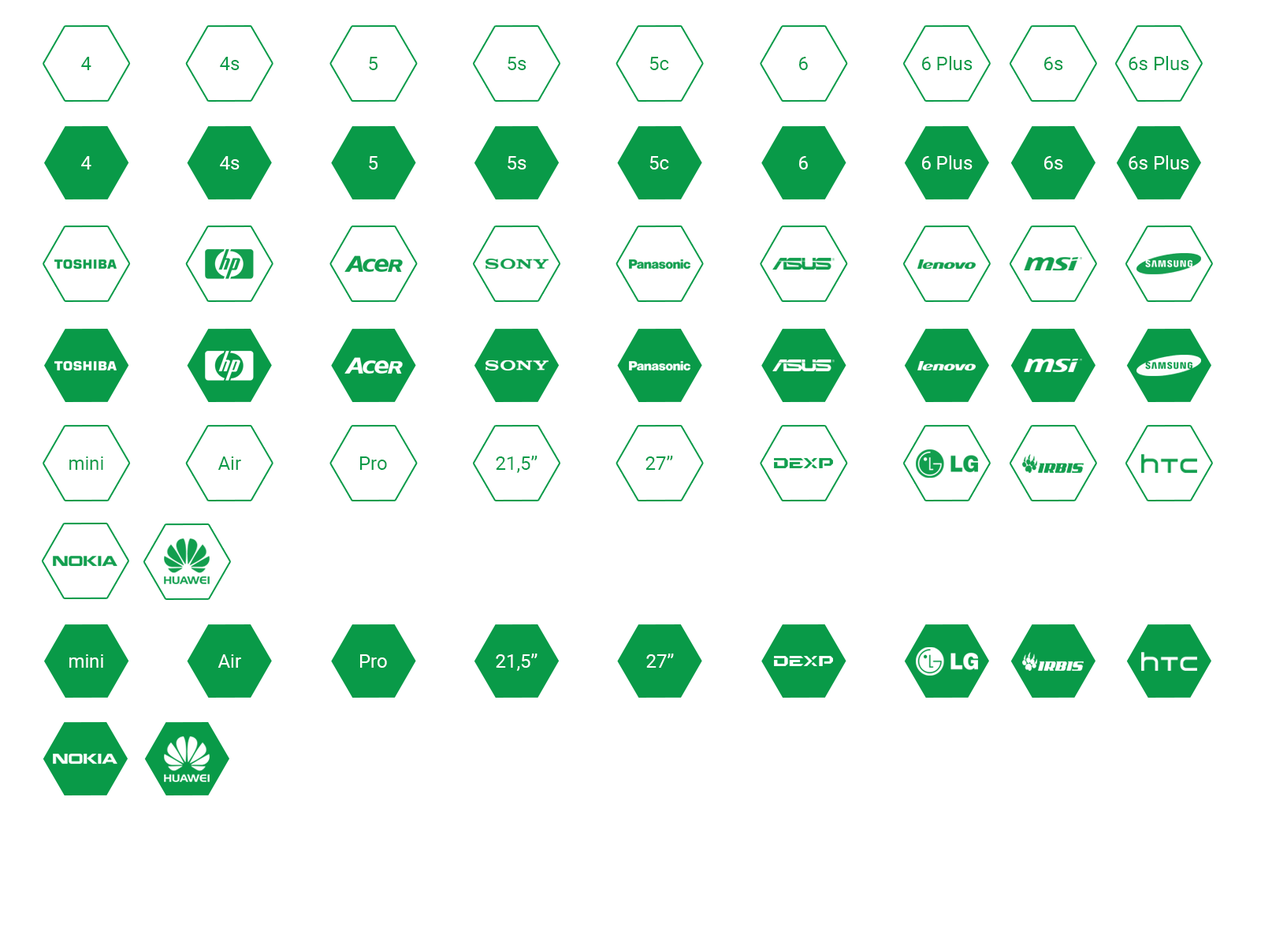
<style>
.page{position:relative;width:1261px;height:946px;background:#ffffff}
.page>*{position:absolute;margin:0}
.t1{font:18.9px "Roboto-Regular";color:#099a48}
.t2{font:18.9px "Roboto-Regular";color:#ffffff}
</style>
<div class="page">
<p class="t1" style="left:81px;top:57px;width:10px;height:13px">4</p>
<p class="t1" style="left:220px;top:57px;width:20px;height:13px">4s</p>
<p class="t1" style="left:369px;top:57px;width:8px;height:13px">5</p>
<p class="t1" style="left:508px;top:57px;width:18px;height:13px">5s</p>
<p class="t1" style="left:649px;top:57px;width:20px;height:13px">5c</p>
<p class="t1" style="left:799px;top:57px;width:9px;height:13px">6</p>
<p class="t1" style="left:922px;top:56px;width:50px;height:14px">6 Plus</p>
<p class="t1" style="left:1044px;top:57px;width:19px;height:13px">6s</p>
<p class="t1" style="left:1129px;top:56px;width:60px;height:14px">6s Plus</p>
<p class="t2" style="left:81px;top:156px;width:10px;height:13px">4</p>
<p class="t2" style="left:220px;top:156px;width:20px;height:13px">4s</p>
<p class="t2" style="left:369px;top:156px;width:8px;height:13px">5</p>
<p class="t2" style="left:508px;top:156px;width:18px;height:13px">5s</p>
<p class="t2" style="left:649px;top:156px;width:20px;height:13px">5c</p>
<p class="t2" style="left:799px;top:156px;width:9px;height:13px">6</p>
<p class="t2" style="left:922px;top:155px;width:50px;height:14px">6 Plus</p>
<p class="t2" style="left:1044px;top:156px;width:19px;height:13px">6s</p>
<p class="t2" style="left:1129px;top:155px;width:60px;height:14px">6s Plus</p>
<p class="t1" style="left:69px;top:456px;width:34px;height:14px">mini</p>
<p class="t1" style="left:218px;top:456px;width:23px;height:14px">Air</p>
<p class="t1" style="left:360px;top:456px;width:27px;height:14px">Pro</p>
<p class="t1" style="left:496px;top:456px;width:41px;height:17px">21,5”</p>
<p class="t1" style="left:645px;top:456px;width:28px;height:14px">27”</p>
<p class="t2" style="left:496px;top:653px;width:41px;height:18px">21,5”</p>
<p class="t2" style="left:646px;top:653px;width:28px;height:14px">27”</p>
<p class="t2" style="left:69px;top:654px;width:34px;height:13px">mini</p>
<p class="t2" style="left:218px;top:654px;width:23px;height:13px">Air</p>
<p class="t2" style="left:360px;top:654px;width:27px;height:13px">Pro</p>
</div>
